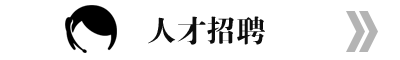
<style>
.page{position:relative;width:400px;height:60px;background:#ffffff}
.page>*{position:absolute;margin:0}
.t1{font:30px "FZDBSJW--GB1-0";color:#0d0d0d}
</style>
<div class="page">
<p class="t1" style="left:148px;top:16px;width:117px;height:29px">人才招聘</p>
</div>
